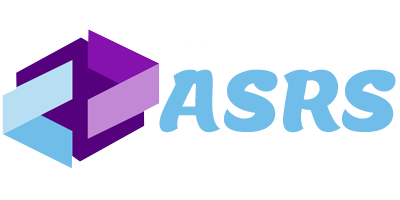
<style>
.page{position:relative;width:400px;height:200px;background:#ffffff}
.page>*{position:absolute;margin:0}
.t1{font:83.3px "Lemon-Regular";color:#70bde9}
</style>
<div class="page">
<p class="t1" style="left:159px;top:69px;width:237px;height:64px">ASRS</p>
</div>
